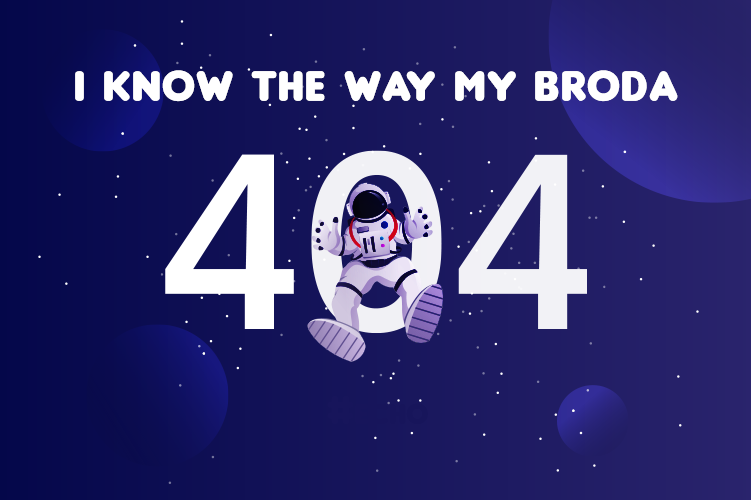
<style>
.page{position:relative;width:751px;height:500px}
.page>*{position:absolute;margin:0}
.t1{font:64.2px "Insaniburger";letter-spacing:0.025em;color:#ffffff;font-variant:small-caps}
</style>
<div class="page">
<p class="t1" style="left:75px;top:70px;width:603px;height:32px">i know the way my broda</p>
</div>
